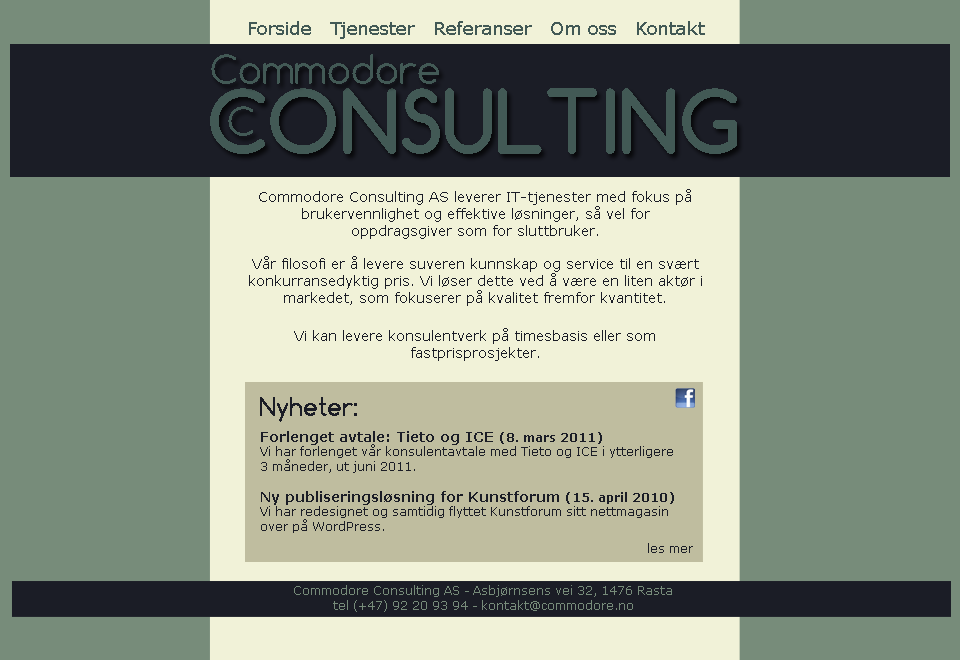
<style>
.page{position:relative;width:960px;height:660px;background:#778c7a}
.page>*{position:absolute;margin:0}
.t1{font:18px "Verdana";color:#425955}
.t2{font:37.8px "Comfortaa";color:#425955}
.t3{font:84px "Comfortaa-Bold";color:#425955}
.t4{font:14px "Verdana";color:#1b1d26}
.t5{font:24px "Comfortaa-Bold";color:#1b1d26}
.t6{font:12px "Verdana";color:#1b1d26}
.t7{font:14px "Verdana-Bold";color:#1b1d26}
.t8{font:12px "Verdana-Bold";color:#1b1d26}
.t9{font:12px "Verdana";color:#778c7a}
</style>
<div class="page">
<p class="t1" style="left:249px;top:21px;width:456px;height:18px">Forside   Tjenester   Referanser   Om oss   Kontakt</p>
<p class="t2" style="left:211px;top:54px;width:228px;height:30px">Commodore</p>
<p class="t3" style="left:210px;top:88px;width:527px;height:66px">CONSULTING</p>
<p class="t2" style="left:228px;top:106px;width:25px;height:30px">C</p>
<p class="t4" style="left:249px;top:189px;width:453px;height:172px;text-align:center">Commodore Consulting AS leverer IT-tjenester med fokus på brukervennlighet og effektive løsninger, så vel for <br>oppdragsgiver som for sluttbruker.<br><br>Vår filosofi er å levere suveren kunnskap og service til en svært konkurransedyktig pris. Vi løser dette ved å være en liten aktør i markedet, som fokuserer på kvalitet fremfor kvantitet.<br><br>Vi kan levere konsulentverk på timesbasis eller som <br>fastprisprosjekter.</p>
<p class="t5" style="left:260px;top:397px;width:97px;height:25px">Nyheter:</p>
<p class="t6" style="left:260px;top:431px;width:414px;height:102px"><span class="t7">Forlenget avtale: Tieto og ICE </span><span class="t8">(8. mars 2011)<br></span>Vi har forlenget vår konsulentavtale med Tieto og ICE i ytterligere <br>3 måneder, ut juni 2011.<br><br><span class="t7">Ny publiseringsløsning for Kunstforum </span><span class="t8">(15. april 2010)<br></span>Vi har redesignet og samtidig flyttet Kunstforum sitt nettmagasin over på WordPress.</p>
<p class="t6" style="left:648px;top:543px;width:45px;height:10px">les mer</p>
<p class="t9" style="left:294px;top:585px;width:378px;height:27px;text-align:center">Commodore Consulting AS - Asbjørnsens vei 32, 1476 Rasta <br>tel (+47) 92 20 93 94 - kontakt@commodore.no</p>
</div>
